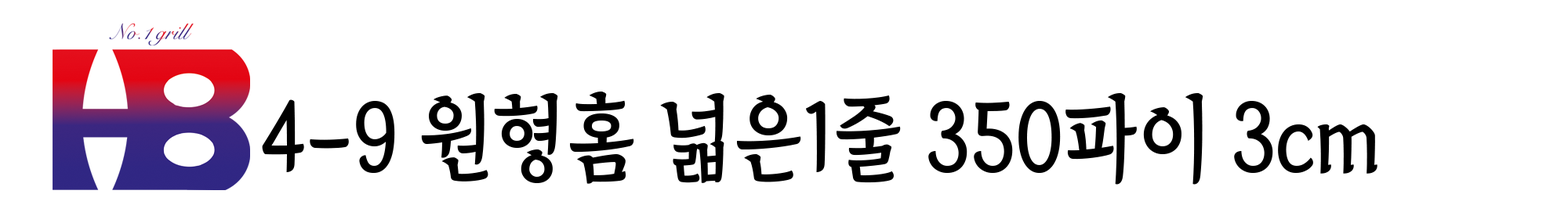
<style>
.page{position:relative;width:1568px;height:205px;background:#ffffff}
.page>*{position:absolute;margin:0}
.t1{font:93.7px "TheIndependenceHallofKorea-Regular";color:#000000;scale:0.89 1}
</style>
<div class="page">
<p class="t1" style="left:262px;top:92px;width:1115px;height:93px">4-9 원형홈 넓은1줄 350파이 3cm</p>
</div>
